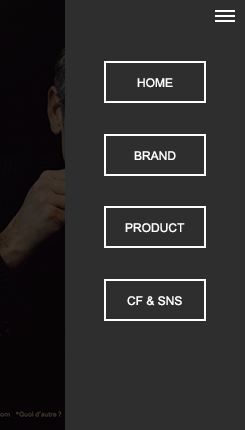
<style>
.page{position:relative;width:245px;height:430px;background:#2e2e2e}
.page>*{position:absolute;margin:0}
.t1{font:12px "ArialMT";color:#ffffff}
</style>
<div class="page">
<p class="t1" style="left:137px;top:78px;width:36px;height:10px">HOME</p>
<p class="t1" style="left:134px;top:151px;width:42px;height:9px">BRAND</p>
<p class="t1" style="left:125px;top:223px;width:60px;height:10px">PRODUCT</p>
<p class="t1" style="left:127px;top:296px;width:55px;height:10px">CF &amp; SNS</p>
</div>
